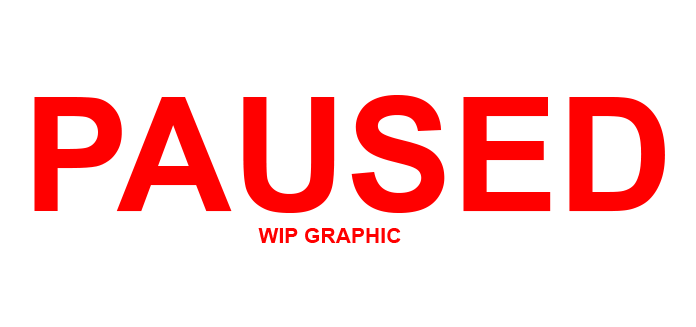
<style>
.page{position:relative;width:696px;height:327px;background:#ffffff}
.page>*{position:absolute;margin:0}
.t1{font:158.7px "Arial-BoldMT";color:#ff0000}
.t2{font:21.2px "Arial-BoldMT";color:#ff0000}
</style>
<div class="page">
<p class="t1" style="left:34px;top:95px;width:631px;height:118px">PAUSED</p>
<p class="t2" style="left:258px;top:228px;width:143px;height:15px">WIP GRAPHIC</p>
</div>
